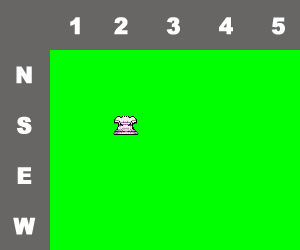
<style>
.page{position:relative;width:300px;height:250px;background:#00ff00}
.page>*{position:absolute;margin:0}
.t1{font:23.1px "Arial-Black";color:#ffffff;font-weight:bold;scale:0.91 1}
</style>
<div class="page">
<p class="t1" style="left:70px;top:17px;width:215px;height:18px">1    2     3     4     5</p>
<p class="t1" style="left:13px;top:66px;width:23px;height:169px;text-align:center">N<br><br>S<br><br>E<br><br>W</p>
</div>
